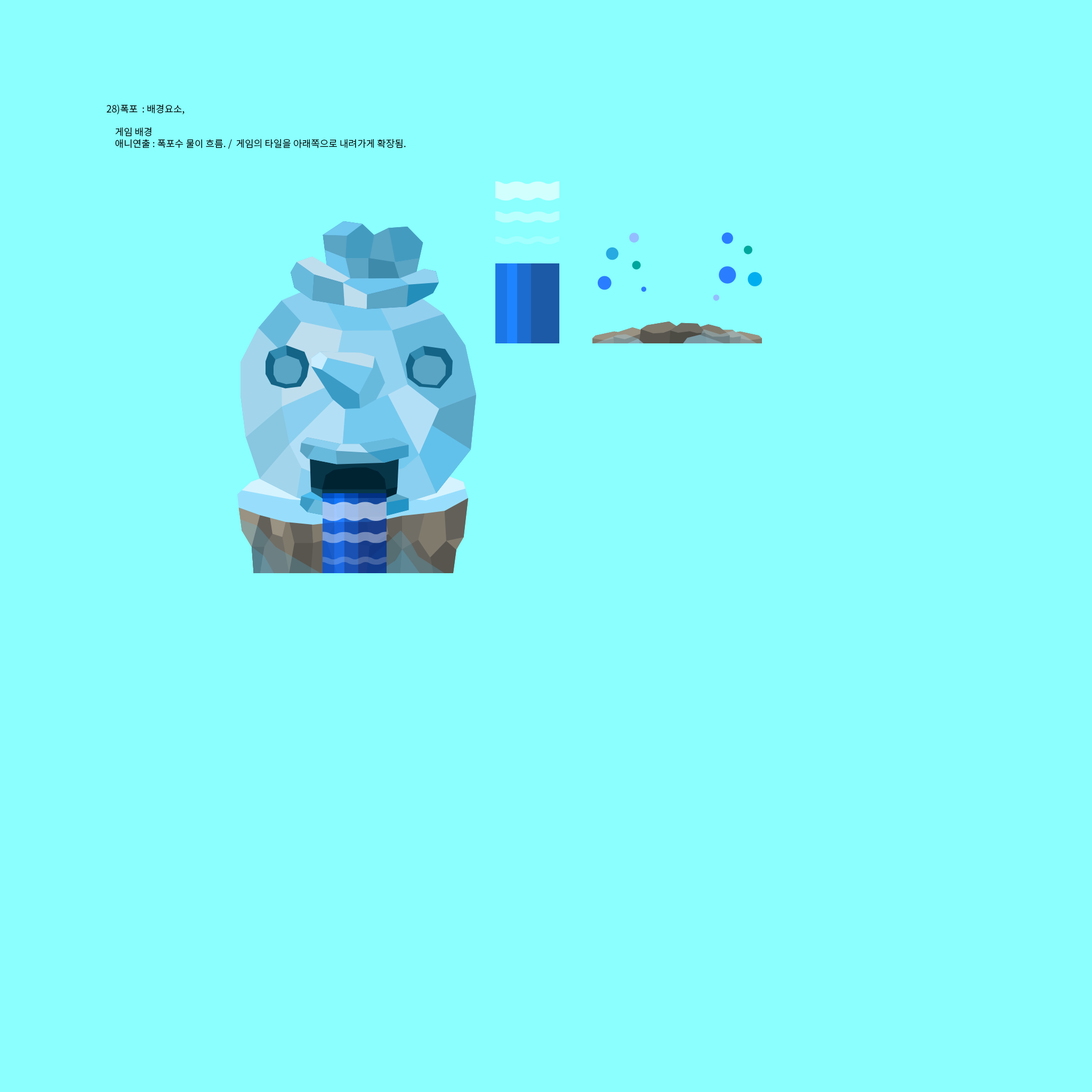
<style>
.page{position:relative;width:1092px;height:1092px;background:#8afffd}
.page>*{position:absolute;margin:0}
.t1{font:9.6px "NotoSansCJKkr-DemiLight";color:#000000}
</style>
<div class="page">
<p class="t1" style="left:107px;top:104px;width:299px;height:45px">28)폭포  : 배경요소,   <br>    <br>    게임 배경<br>    애니연출 : 폭포수 물이 흐름. /  게임의 타일을 아래쪽으로 내려가게 확장됨.</p>
</div>
